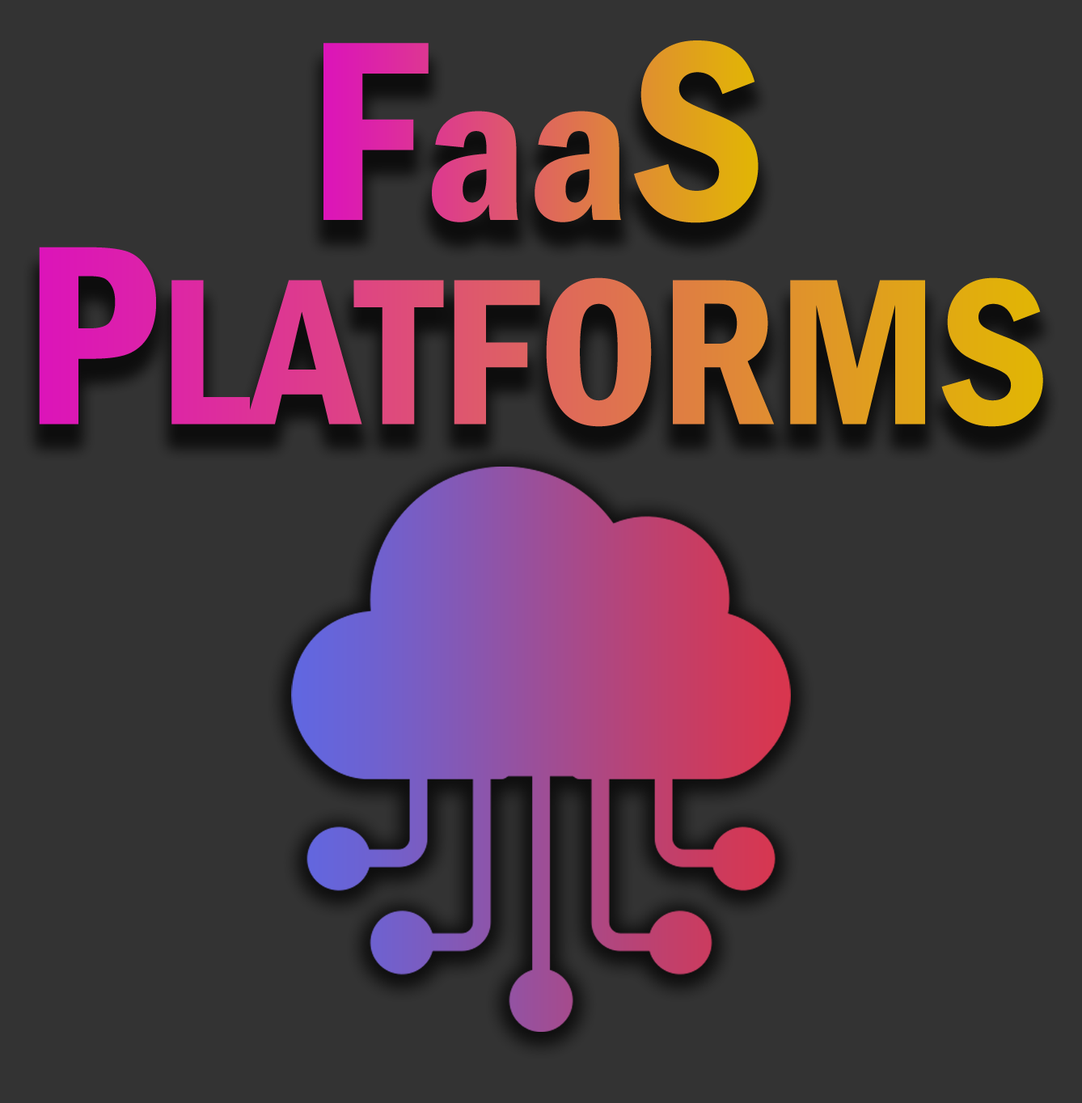
<style>
.page{position:relative;width:1082px;height:1103px;background:#333333}
.page>*{position:absolute;margin:0}
.t1{font:215.6px "FranklinGothic-DemiCond"}
.t2{font:264.9px "FranklinGothic-DemiCond"}
</style>
<div class="page">
<p class="t1" style="left:323px;top:40px;width:435px;height:183px"><span class="t2">F</span>aa<span class="t2">S</span></p>
<p class="t1" style="left:39px;top:247px;width:1004px;height:180px"><span class="t2">P</span>LATFORMS</p>
</div>
